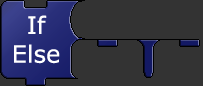
<style>
.page{position:relative;width:203px;height:86px;background:#333333}
.page>*{position:absolute;margin:0}
.t1{font:24px "Verdana";color:#ffffff}
</style>
<div class="page">
<p class="t1" style="left:14px;top:15px;width:46px;height:49px;text-align:center">If<br>Else</p>
</div>
